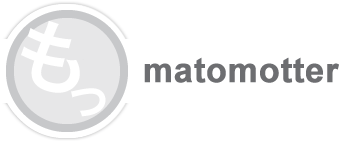
<style>
.page{position:relative;width:362px;height:141px;background:#ffffff}
.page>*{position:absolute;margin:0}
.t1{font:80px "HiraKakuProN-W6";color:#ffffff}
.t2{font:34px "Arial-BoldMT";color:#6d6e71;font-weight:bold}
.t3{font:50px "HiraKakuProN-W6";color:#ffffff}
</style>
<div class="page">
<p class="t1" style="left:21px;top:20px;width:59px;height:73px;rotate:13deg">も</p>
<p class="t2" style="left:144px;top:57px;width:195px;height:26px">matomotter</p>
<p class="t3" style="left:71px;top:88px;width:35px;height:29px">っ</p>
</div>
